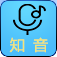
<style>
.page{position:relative;width:57px;height:57px}
.page>*{position:absolute;margin:0}
.t1{font:15px "YaHei-Consolas-Hybrid";color:#f4e478}
</style>
<div class="page">
<p class="t1" style="left:9px;top:37px;width:39px;height:16px">知 音</p>
</div>
